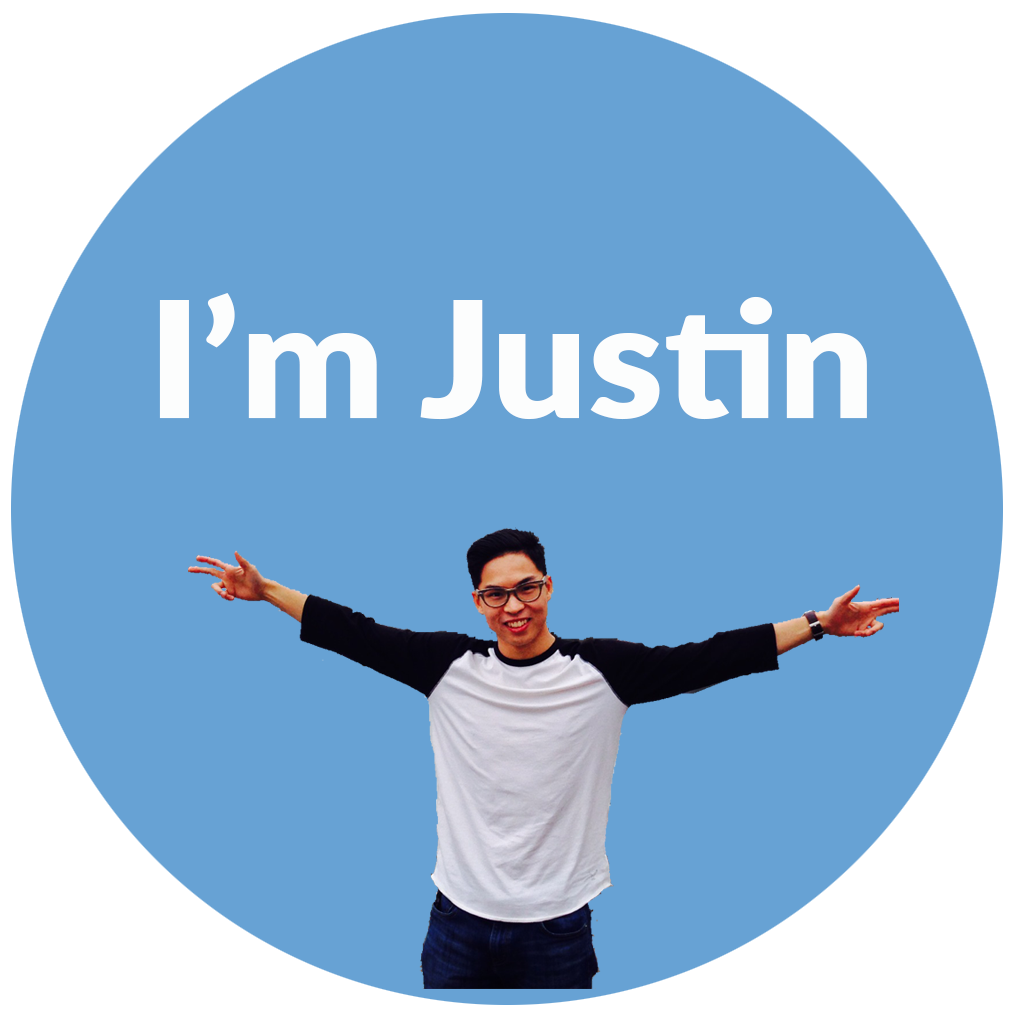
<style>
.page{position:relative;width:1024px;height:1024px;background:#67a2d4}
.page>*{position:absolute;margin:0}
.t1{font:161.4px "Lato-Black";color:#fcfdfd;scale:1.06 1}
</style>
<div class="page">
<p class="t1" style="left:159px;top:293px;width:708px;height:127px">I’m Justin</p>
</div>
